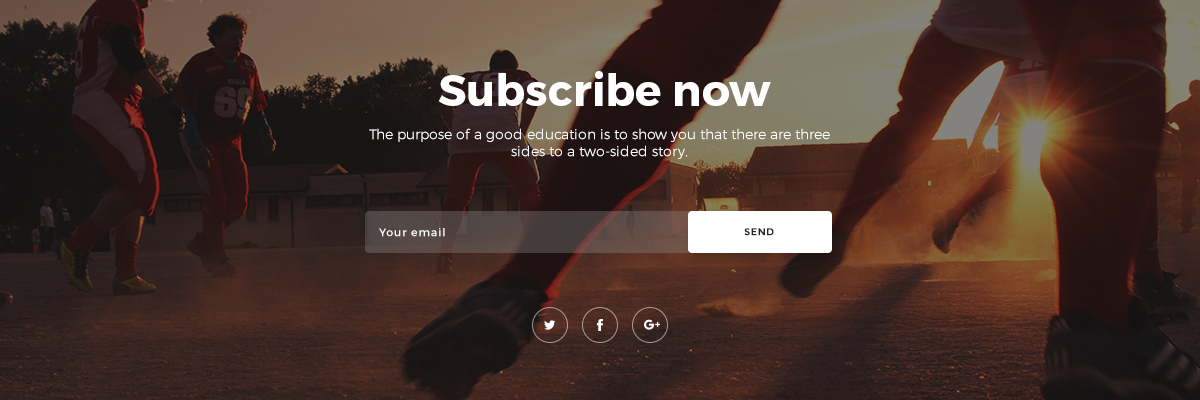
<style>
.page{position:relative;width:1200px;height:400px}
.page>*{position:absolute;margin:0}
.t1{font:44px "Montserrat-Bold";color:#ffffff}
.t2{font:14px "Montserrat-Light";color:#ffffff}
.t3{font:11px "Montserrat-Regular";letter-spacing:0.08em;color:#ffffff}
.t4{font:10px "Montserrat-Bold";letter-spacing:0.04em;color:#242525;text-transform:uppercase}
</style>
<div class="page">
<p class="t1" style="left:438px;top:71px;width:333px;height:35px">Subscribe now</p>
<p class="t2" style="left:369px;top:128px;width:461px;height:31px;text-align:center">The purpose of a good education is to show you that there are three sides to a two-sided story.</p>
<p class="t3" style="left:379px;top:228px;width:66px;height:9px">Your email</p>
<p class="t4" style="left:744px;top:228px;width:30px;height:8px">send</p>
</div>
